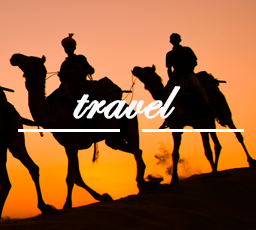
<style>
.page{position:relative;width:256px;height:230px}
.page>*{position:absolute;margin:0}
.t1{font:60px "EdwardianScriptITC";color:#f9fafb;font-weight:bold}
</style>
<div class="page">
<p class="t1" style="left:73px;top:86px;width:108px;height:33px">travel</p>
</div>
